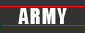
<style>
.page{position:relative;width:85px;height:33px;background:#333333}
.page>*{position:absolute;margin:0}
.t1{font:20px "Impact";letter-spacing:0.06em;color:#ffffff}
</style>
<div class="page">
<p class="t1" style="left:18px;top:8px;width:49px;height:16px">ARMY</p>
</div>
